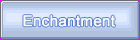
<style>
.page{position:relative;width:140px;height:40px;background:#b1c0db}
.page>*{position:absolute;margin:0}
.t1{font:15px "ArialMT";color:#ffffff;font-weight:bold}
</style>
<div class="page">
<p class="t1" style="left:23px;top:15px;width:92px;height:12px">Enchantment</p>
</div>
